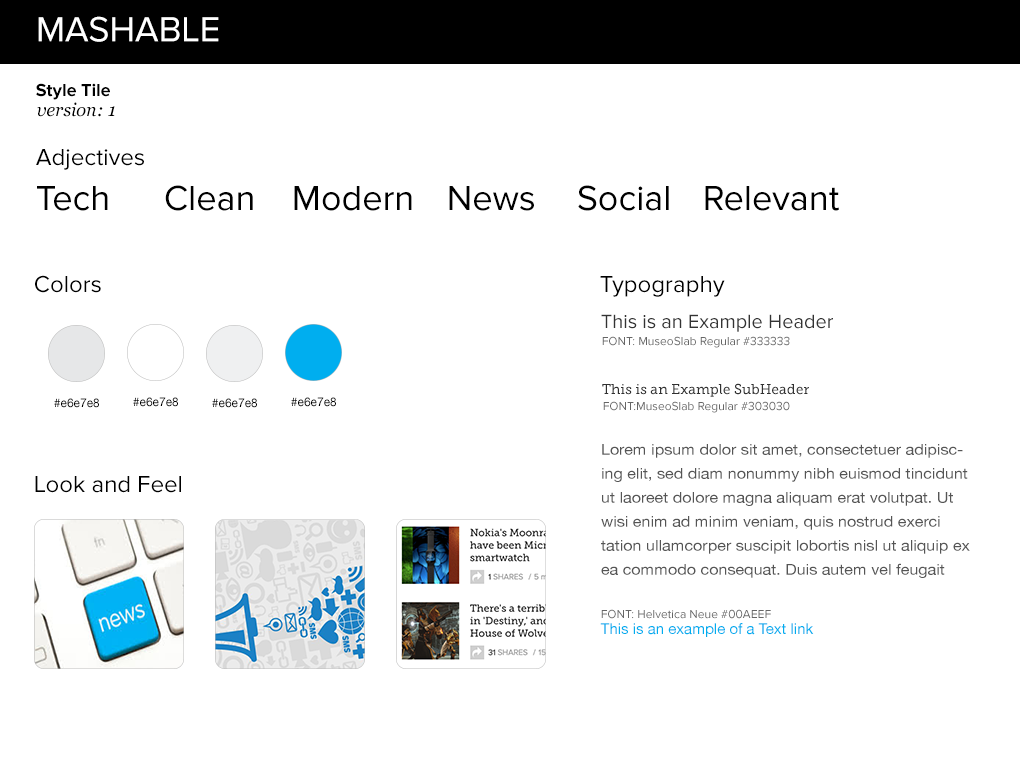
<style>
.page{position:relative;width:1020px;height:760px;background:#ffffff}
.page>*{position:absolute;margin:0}
.t1{font:36px "ProximaNova-Regular";color:#ffffff}
.t2{font:18px "ProximaNova-Bold";color:#000000}
.t3{font:18px "Georgia-Italic";color:#000000}
.t4{font:24px "ProximaNova-Regular";color:#000000}
.t5{font:36px "ProximaNova-Regular";color:#000000}
.t6{font:20px "ProximaNova-Regular";color:#333333}
.t7{font:12px "ProximaNova-Regular";color:#666666}
.t8{font:14px "MuseoSlab-500";color:#303030}
.t9{font:12px "HelveticaNeue";color:#000000}
.t10{font:15px/24px "HelveticaNeue";color:#555555;scale:1.07 1}
.t11{font:15px "HelveticaNeue";color:#00aeef}
</style>
<div class="page">
<p class="t1" style="left:38px;top:16px;width:181px;height:26px">MASHABLE</p>
<p class="t2" style="left:36px;top:83px;width:74px;height:17px">Style Tile</p>
<p class="t3" style="left:37px;top:102px;width:78px;height:15px">version: 1</p>
<p class="t4" style="left:36px;top:149px;width:108px;height:21px">Adjectives</p>
<p class="t5" style="left:165px;top:185px;width:88px;height:26px">Clean</p>
<p class="t5" style="left:578px;top:185px;width:91px;height:26px">Social</p>
<p class="t5" style="left:37px;top:186px;width:71px;height:25px">Tech</p>
<p class="t5" style="left:294px;top:186px;width:118px;height:25px">Modern</p>
<p class="t5" style="left:449px;top:186px;width:85px;height:25px">News</p>
<p class="t5" style="left:705px;top:186px;width:134px;height:25px">Relevant</p>
<p class="t4" style="left:35px;top:275px;width:66px;height:18px">Colors</p>
<p class="t4" style="left:600px;top:276px;width:125px;height:21px">Typography</p>
<p class="t6" style="left:601px;top:314px;width:232px;height:18px">This is an Example Header</p>
<p class="t7" style="left:602px;top:336px;width:188px;height:12px">FONT: MuseoSlab Regular #333333</p>
<p class="t8" style="left:602px;top:383px;width:207px;height:14px">This is an Example SubHeader</p>
<p class="t9" style="left:54px;top:398px;width:45px;height:10px">#e6e7e8</p>
<p class="t9" style="left:133px;top:397px;width:45px;height:10px">#e6e7e8</p>
<p class="t9" style="left:212px;top:398px;width:45px;height:10px">#e6e7e8</p>
<p class="t9" style="left:291px;top:397px;width:45px;height:10px">#e6e7e8</p>
<p class="t7" style="left:603px;top:401px;width:187px;height:12px">FONT:MuseoSlab Regular #303030</p>
<p class="t10" style="left:601px;top:444px;width:369px;height:134px">Lorem ipsum dolor sit amet, consectetuer adipiscing elit, sed diam nonummy nibh euismod tincidunt ut laoreet dolore magna aliquam erat volutpat. Ut wisi enim ad minim veniam, quis nostrud exerci tation ullamcorper suscipit lobortis nisl ut aliquip ex ea commodo consequat. Duis autem vel feugait nulla facilisi.</p>
<p class="t4" style="left:35px;top:476px;width:146px;height:17px">Look and Feel</p>
<p class="t7" style="left:601px;top:609px;width:170px;height:10px">FONT: Helvetica Neue #00AEEF</p>
<p class="t11" style="left:600px;top:623px;width:214px;height:14px">This is an example of a Text link</p>
</div>
